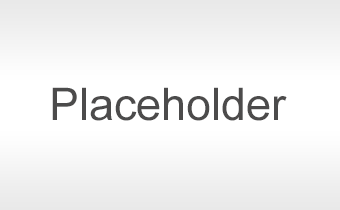
<style>
.page{position:relative;width:340px;height:210px;background:#ffffff}
.page>*{position:absolute;margin:0}
.t1{font:45px "ArialMT";color:#4c4b4b}
</style>
<div class="page">
<p class="t1" style="left:52px;top:87px;width:235px;height:34px">Placeholder</p>
</div>
